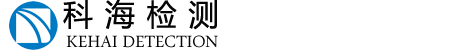
<style>
.page{position:relative;width:465px;height:51px;background:#ffffff}
.page>*{position:absolute;margin:0}
.t1{font:30px "MicrosoftYaHeiUI";color:#050505}
.t2{font:24px "ArabicTypesetting";color:#050505}
</style>
<div class="page">
<p class="t1" style="left:63px;top:0px;width:154px;height:30px">科    海    检    测</p>
<p class="t2" style="left:66px;top:35px;width:152px;height:13px">KEHAI DETECTION</p>
</div>
